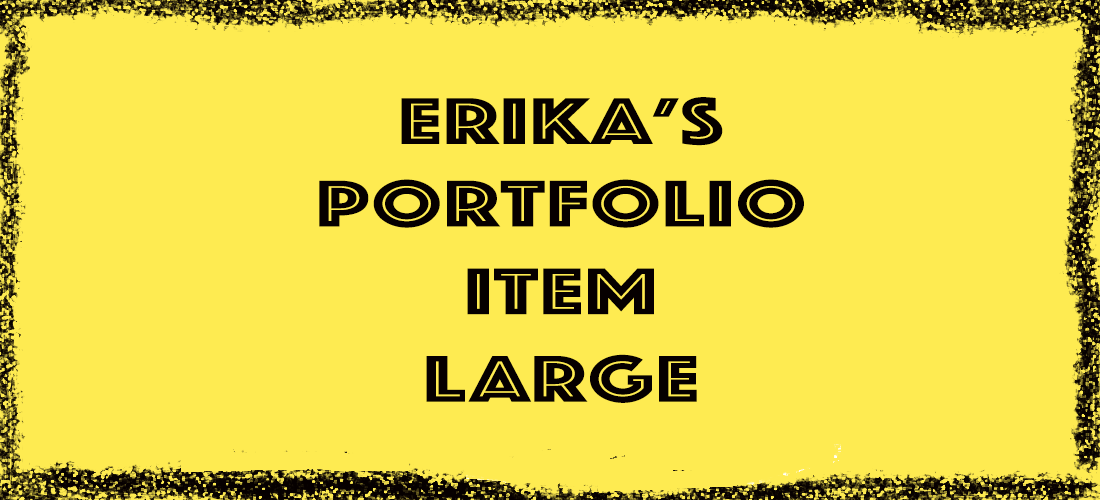
<style>
.page{position:relative;width:1100px;height:500px;background:#feeb51}
.page>*{position:absolute;margin:0}
.t1{font:68.8px "Phosphate-Inline";letter-spacing:0.02em;color:#060000;scale:1.38 1}
</style>
<div class="page">
<p class="t1" style="left:319px;top:97px;width:485px;height:306px;text-align:center">Erika’s portfolio<br>Item<br>LARGE</p>
</div>
